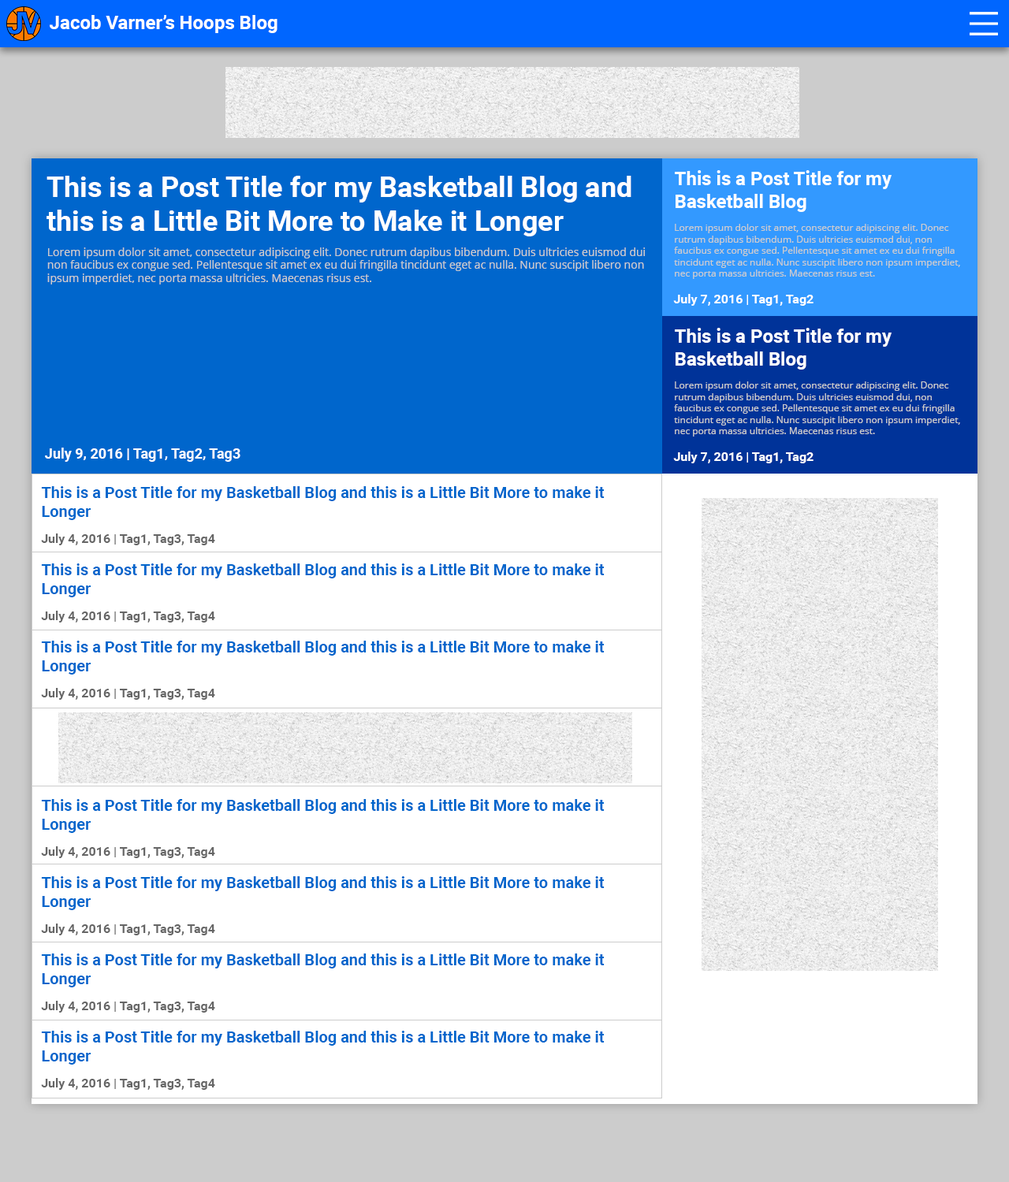
<style>
.page{position:relative;width:1009px;height:1182px;background:#ffffff}
.page>*{position:absolute;margin:0}
.t1{font:18.9px "Roboto-Bold";color:#ffffff}
.t2{font:28.4px "Roboto-Bold";color:#ffffff}
.t3{font:9.5px "OpenSans";color:#cccccc}
.t4{font:11px "OpenSans";color:#cccccc}
.t5{font:12.6px "Roboto-Bold";color:#ffffff}
.t6{font:14.2px "Roboto-Bold";color:#ffffff}
.t7{font:15.8px "Roboto-Bold";color:#0066cc}
.t8{font:12.6px "Roboto-Bold";color:#666666}
</style>
<div class="page">
<p class="t1" style="left:50px;top:15px;width:227px;height:18px">Jacob Varner’s Hoops Blog</p>
<p class="t1" style="left:675px;top:170px;width:216px;height:42px">This is a Post Title for my<br>Basketball Blog</p>
<p class="t2" style="left:46px;top:176px;width:585px;height:60px">This is a Post Title for my Basketball Blog and<br>this is a Little Bit More to Make it Longer</p>
<p class="t3" style="left:674px;top:224px;width:286px;height:55px">Lorem ipsum dolor sit amet, consectetur adipiscing elit. Donec<br>rutrum dapibus bibendum. Duis ultricies euismod dui, non<br>faucibus ex congue sed. Pellentesque sit amet ex eu dui fringilla<br>tincidunt eget ac nulla. Nunc suscipit libero non ipsum imperdiet,<br>nec porta massa ultricies. Maecenas risus est.</p>
<p class="t4" style="left:47px;top:247px;width:598px;height:37px">Lorem ipsum dolor sit amet, consectetur adipiscing elit. Donec rutrum dapibus bibendum. Duis ultricies euismod dui<br>non faucibus ex congue sed. Pellentesque sit amet ex eu dui fringilla tincidunt eget ac nulla. Nunc suscipit libero non<br>ipsum imperdiet, nec porta massa ultricies. Maecenas risus est.</p>
<p class="t5" style="left:673px;top:294px;width:140px;height:12px">July 7, 2016 | Tag1, Tag2</p>
<p class="t1" style="left:675px;top:328px;width:216px;height:42px">This is a Post Title for my<br>Basketball Blog</p>
<p class="t3" style="left:674px;top:381px;width:286px;height:56px">Lorem ipsum dolor sit amet, consectetur adipiscing elit. Donec<br>rutrum dapibus bibendum. Duis ultricies euismod dui, non<br>faucibus ex congue sed. Pellentesque sit amet ex eu dui fringilla<br>tincidunt eget ac nulla. Nunc suscipit libero non ipsum imperdiet,<br>nec porta massa ultricies. Maecenas risus est.</p>
<p class="t6" style="left:45px;top:448px;width:195px;height:14px">July 9, 2016 | Tag1, Tag2, Tag3</p>
<p class="t5" style="left:673px;top:452px;width:140px;height:11px">July 7, 2016 | Tag1, Tag2</p>
<p class="t7" style="left:41px;top:486px;width:563px;height:34px">This is a Post Title for my Basketball Blog and this is a Little Bit More to make it<br>Longer</p>
<p class="t8" style="left:41px;top:534px;width:174px;height:11px">July 4, 2016 | Tag1, Tag3, Tag4</p>
<p class="t7" style="left:41px;top:563px;width:563px;height:34px">This is a Post Title for my Basketball Blog and this is a Little Bit More to make it<br>Longer</p>
<p class="t8" style="left:41px;top:611px;width:174px;height:12px">July 4, 2016 | Tag1, Tag3, Tag4</p>
<p class="t7" style="left:41px;top:641px;width:563px;height:34px">This is a Post Title for my Basketball Blog and this is a Little Bit More to make it<br>Longer</p>
<p class="t8" style="left:41px;top:688px;width:174px;height:12px">July 4, 2016 | Tag1, Tag3, Tag4</p>
<p class="t7" style="left:41px;top:799px;width:563px;height:34px">This is a Post Title for my Basketball Blog and this is a Little Bit More to make it<br>Longer</p>
<p class="t8" style="left:41px;top:846px;width:174px;height:12px">July 4, 2016 | Tag1, Tag3, Tag4</p>
<p class="t7" style="left:41px;top:876px;width:563px;height:34px">This is a Post Title for my Basketball Blog and this is a Little Bit More to make it<br>Longer</p>
<p class="t8" style="left:41px;top:924px;width:174px;height:11px">July 4, 2016 | Tag1, Tag3, Tag4</p>
<p class="t7" style="left:41px;top:954px;width:563px;height:33px">This is a Post Title for my Basketball Blog and this is a Little Bit More to make it<br>Longer</p>
<p class="t8" style="left:41px;top:1001px;width:174px;height:12px">July 4, 2016 | Tag1, Tag3, Tag4</p>
<p class="t7" style="left:41px;top:1031px;width:563px;height:34px">This is a Post Title for my Basketball Blog and this is a Little Bit More to make it<br>Longer</p>
<p class="t8" style="left:41px;top:1078px;width:174px;height:12px">July 4, 2016 | Tag1, Tag3, Tag4</p>
</div>
